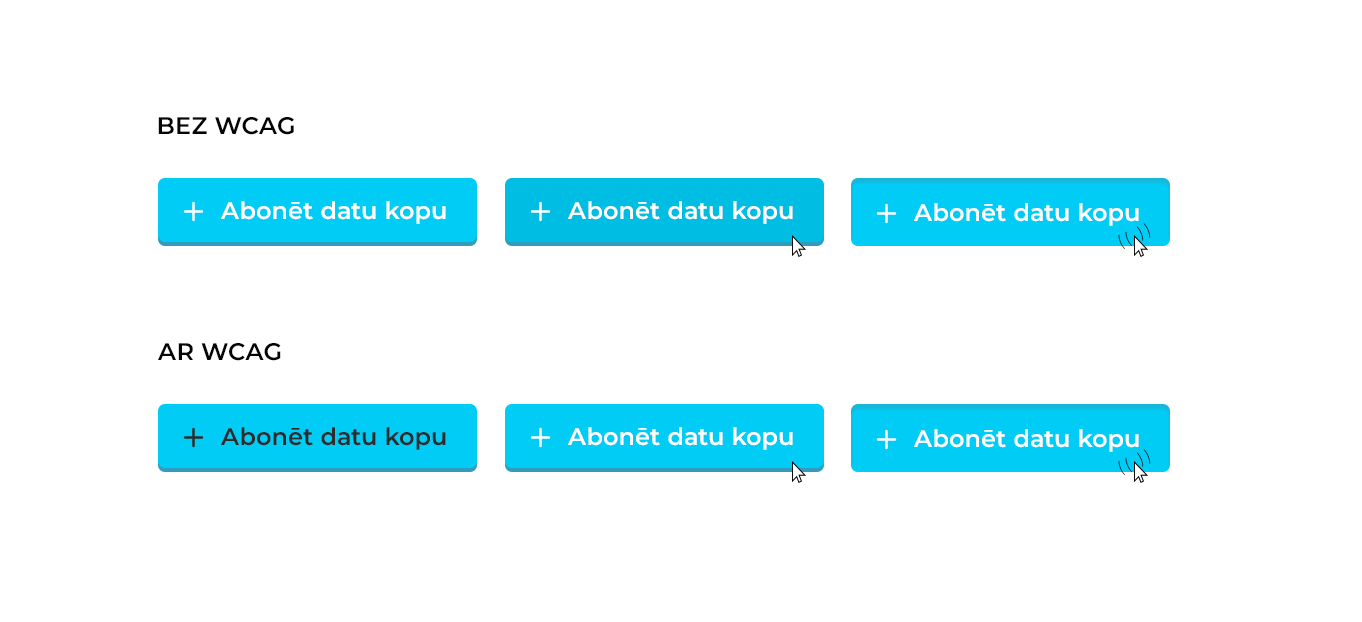
<style>
.page{position:relative;width:1362px;height:622px;background:#ffffff}
.page>*{position:absolute;margin:0}
.t1{font:24px "Montserrat-SemiBold";letter-spacing:0.01em;color:#050505}
.t2{font:24px "Montserrat-SemiBold";letter-spacing:0.01em;color:#ffffff}
.t3{font:16px "Montserrat-Light";letter-spacing:0.3em;scale:0.75 1}
.t4{font:24px "Montserrat-SemiBold";letter-spacing:0.01em;color:#2c2c2c}
</style>
<div class="page">
<p class="t1" style="left:158px;top:117px;width:136px;height:18px">BEZ WCAG</p>
<p class="t2" style="left:221px;top:201px;width:225px;height:23px">Abonēt datu kopu</p>
<p class="t2" style="left:568px;top:201px;width:225px;height:23px">Abonēt datu kopu</p>
<p class="t2" style="left:914px;top:203px;width:225px;height:23px">Abonēt datu kopu</p>
<p class="t3" style="left:1118px;top:223px;width:33px;height:26px;rotate:-23deg">(( ))</p>
<p class="t1" style="left:158px;top:343px;width:123px;height:18px">AR WCAG</p>
<p class="t4" style="left:221px;top:427px;width:225px;height:23px">Abonēt datu kopu</p>
<p class="t2" style="left:568px;top:427px;width:225px;height:23px">Abonēt datu kopu</p>
<p class="t2" style="left:914px;top:429px;width:225px;height:23px">Abonēt datu kopu</p>
<p class="t3" style="left:1118px;top:449px;width:33px;height:26px;rotate:-23deg">(( ))</p>
</div>
